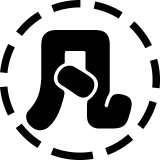
<style>
.page{position:relative;width:160px;height:160px;background:#ffffff}
.page>*{position:absolute;margin:0}
.t1{font:108.2px "STHupo";color:#010101}
</style>
<div class="page">
<p class="t1" style="left:26px;top:30px;width:106px;height:101px">凡</p>
</div>
